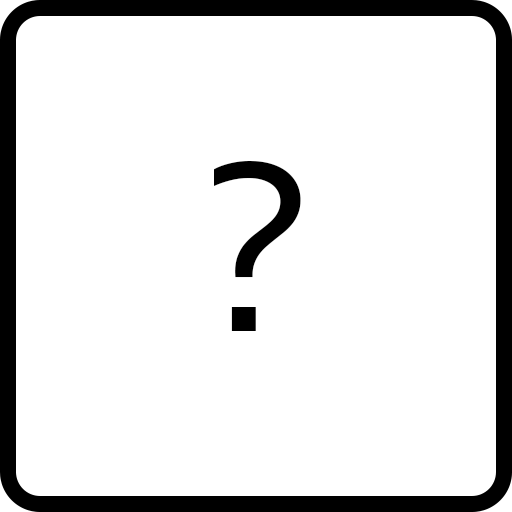
<style>
.page{position:relative;width:512px;height:512px;background:#ffffff}
.page>*{position:absolute;margin:0}
.t1{font:256px "Corbel";letter-spacing:-0.02em;color:#000000}
</style>
<div class="page">
<p class="t1" style="left:214px;top:161px;width:87px;height:170px">?</p>
</div>
